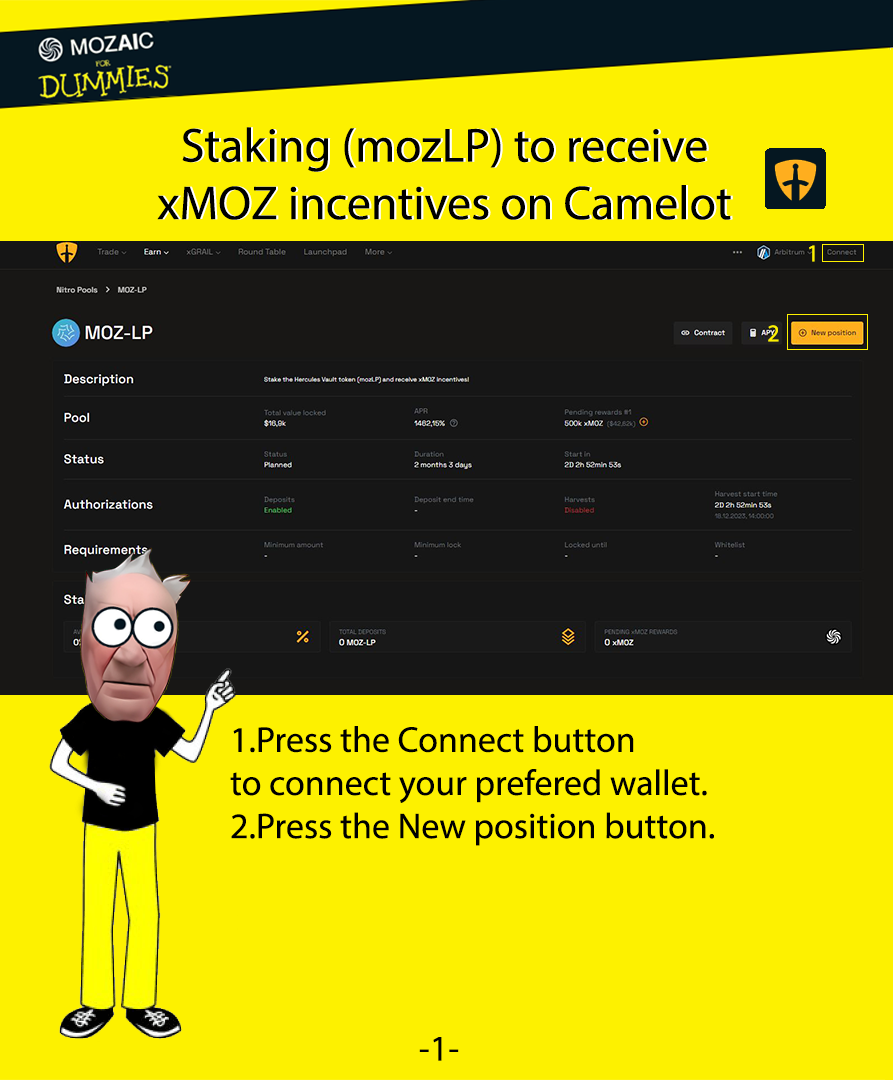
<style>
.page{position:relative;width:893px;height:1080px;background:#fdf100}
.page>*{position:absolute;margin:0}
.t1{font:48px "MyriadPro-Regular";color:#000000}
.t2{font:48px "MyriadPro-Regular"}
.t3{font:24px "MyriadPro-Regular";color:#fdf100}
.t4{font:36px "MyriadPro-Regular";color:#000000}
.t5{font:36px "MyriadPro-Regular";color:#fdf100}
</style>
<div class="page">
<p class="t1" style="left:157px;top:127px;width:574px;height:93px;text-align:center">Staking (mozLP) to receive <br>xMOZ incentives on Camelot</p>
<p class="t2" style="left:159px;top:127px;width:574px;height:93px;text-align:center">Staking (mozLP) to receive <br>xMOZ incentives on Camelot</p>
<p class="t3" style="left:809px;top:245px;width:6px;height:17px">1</p>
<p class="t3" style="left:768px;top:325px;width:11px;height:17px">2</p>
<p class="t4" style="left:230px;top:726px;width:484px;height:120px"><span class="t5"><br></span>1.Press the Connect button <br>to connect your prefered wallet.<br>2.Press the New position button.</p>
<p class="t4" style="left:419px;top:1037px;width:40px;height:24px">-1-</p>
</div>
